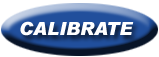
<style>
.page{position:relative;width:159px;height:57px;background:#ffffff}
.page>*{position:absolute;margin:0}
.t1{font:18px "Arial-BlackItalic";color:#ffffff}
</style>
<div class="page">
<p class="t1" style="left:20px;top:21px;width:114px;height:15px">CALIBRATE</p>
</div>
